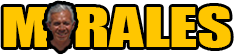
<style>
.page{position:relative;width:234px;height:55px;background:#ffc600}
.page>*{position:absolute;margin:0}
.t1{font:50px "Impact";color:#ffc600;scale:1.35 1}
</style>
<div class="page">
<p class="t1" style="left:3px;top:6px;width:228px;height:42px">M  RALES</p>
</div>
